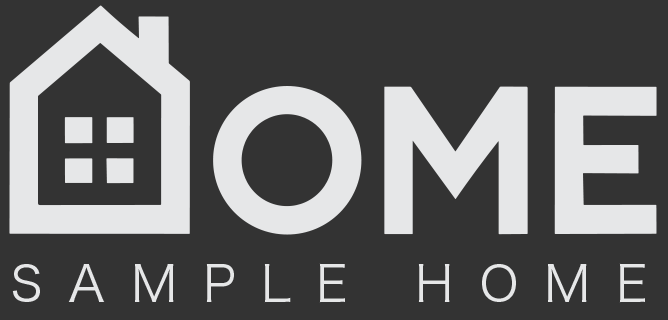
<style>
.page{position:relative;width:668px;height:320px;background:#333333}
.page>*{position:absolute;margin:0}
.t1{font:49.2px "HiraKakuProN-W3";letter-spacing:0.52em;color:#e6e7e8}
</style>
<div class="page">
<p class="t1" style="left:12px;top:263px;width:633px;height:40px">SAMPLE HOME</p>
</div>
